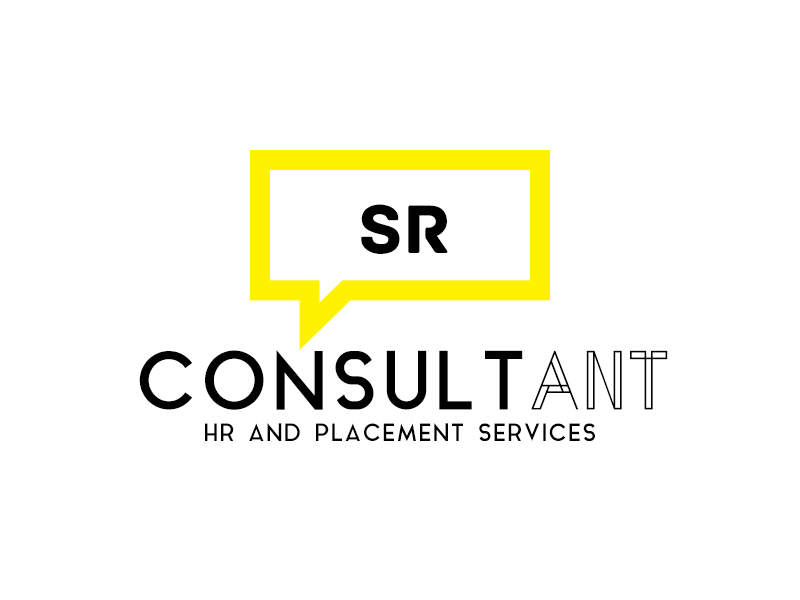
<style>
.page{position:relative;width:800px;height:600px;background:#ffffff}
.page>*{position:absolute;margin:0}
.t1{font:72px "Archive";letter-spacing:0.005em;color:#000000}
.t2{font:80px "AquaGrotesque";letter-spacing:0.005em;color:#000000}
.t3{font:80px "Metria";letter-spacing:0.005em;color:#000000}
.t4{font:24px "AquaGrotesque";letter-spacing:0.005em;color:#000000}
</style>
<div class="page">
<p class="t1" style="left:361px;top:204px;width:87px;height:50px">SR</p>
<p class="t2" style="left:139px;top:350px;width:529px;height:60px">CONSULT<span class="t3">ANT</span></p>
<p class="t4" style="left:205px;top:423px;width:390px;height:19px">HR AND PLACEMENT SERVICES</p>
</div>
